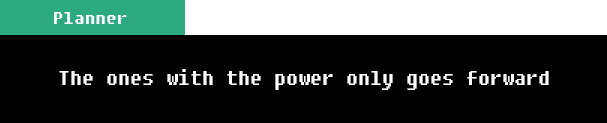
<style>
.page{position:relative;width:607px;height:123px;background:#000000}
.page>*{position:absolute;margin:0}
.t1{font:21.3px "DungGeunMo";color:#ffffff}
.t2{font:24px "DungGeunMo";color:#ffffff}
</style>
<div class="page">
<p class="t1" style="left:54px;top:12px;width:73px;height:12px">Planner</p>
<p class="t2" style="left:59px;top:69px;width:490px;height:21px">The ones with the power only goes forward</p>
</div>
